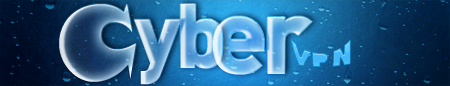
<style>
.page{position:relative;width:450px;height:86px}
.page>*{position:absolute;margin:0}
.t1{font:103.1px "SnapITC-Regular";letter-spacing:-0.06em}
.t2{font:90px "DIN-Black";letter-spacing:-0.06em}
.t3{font:105.9px "DIN-Black";letter-spacing:-0.06em}
.t4{font:34.3px "DIN-Black";letter-spacing:-0.06em}
</style>
<div class="page">
<p class="t1" style="left:59px;top:4px;width:77px;height:78px">C</p>
<p class="t2" style="left:134px;top:4px;width:89px;height:81px">yb</p>
<p class="t3" style="left:212px;top:16px;width:100px;height:59px">er</p>
<p class="t4" style="left:291px;top:39px;width:60px;height:28px">VPN</p>
</div>
